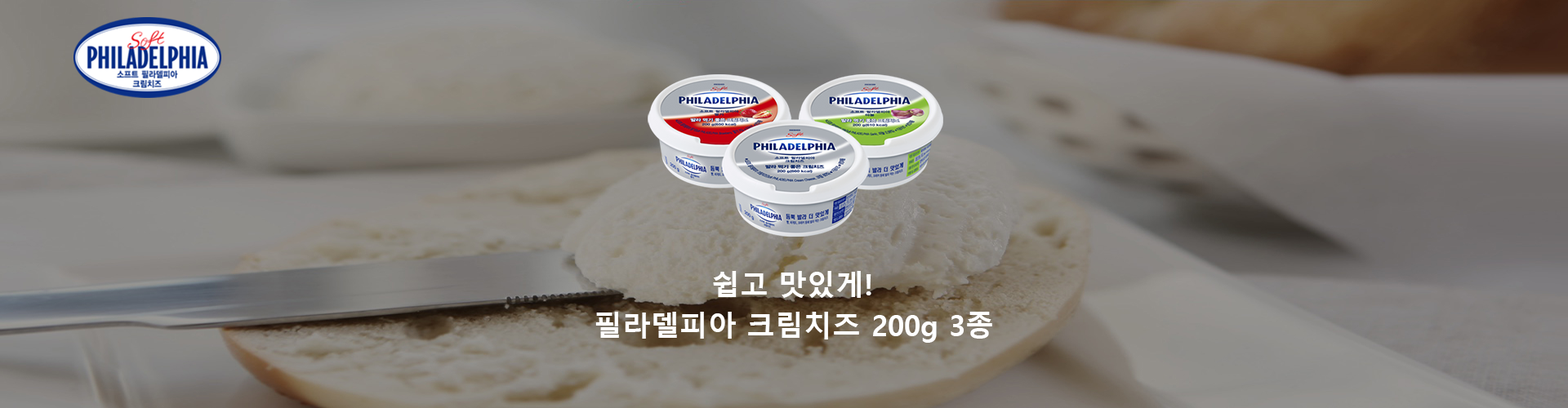
<style>
.page{position:relative;width:1568px;height:408px}
.page>*{position:absolute;margin:0}
.t1{font:28.6px "MalgunGothicBold";color:#ffffff}
</style>
<div class="page">
<p class="t1" style="left:713px;top:271px;width:158px;height:27px">쉽고 맛있게!</p>
<p class="t1" style="left:595px;top:312px;width:397px;height:31px">필라델피아 크림치즈 200g 3종</p>
</div>
